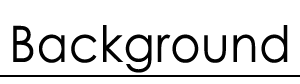
<style>
.page{position:relative;width:300px;height:84px;background:#ffffff}
.page>*{position:absolute;margin:0}
.t1{font:50.1px "CenturyGothic";letter-spacing:0.02em;color:#010101;scale:0.92 1}
</style>
<div class="page">
<p class="t1" style="left:13px;top:25px;width:275px;height:48px">Background</p>
</div>
